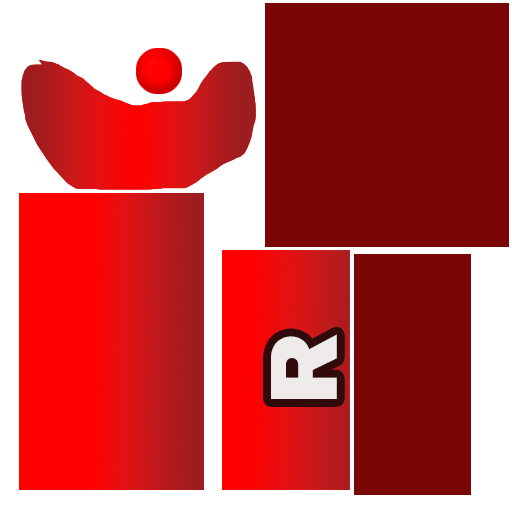
<style>
.page{position:relative;width:512px;height:512px;background:#7a0606}
.page>*{position:absolute;margin:0}
.t1{font:95.6px "ArchivoBlack-Regular";letter-spacing:-0.06em;color:#f0ebeb}
</style>
<div class="page">
<p class="t1" style="left:271px;top:334px;width:66px;height:65px;rotate:-90deg">R</p>
</div>
